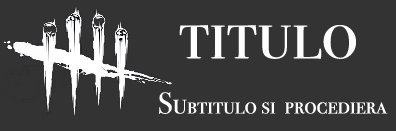
<style>
.page{position:relative;width:396px;height:131px;background:#333333}
.page>*{position:absolute;margin:0}
.t1{font:72px "BodoniSvtyTwoSCITCTT-Book";color:#fefefe}
.t2{font:24px "BodoniSvtyTwoSCITCTT-Book";color:#fefefe}
.t3{font:30px "BodoniSvtyTwoSCITCTT-Book";color:#fefefe}
</style>
<div class="page">
<p class="t1" style="left:179px;top:25px;width:177px;height:34px">titulo</p>
<p class="t2" style="left:159px;top:92px;width:229px;height:22px"><span class="t3">Su</span>btitulo si  procediera</p>
</div>
